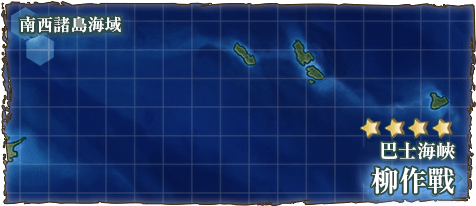
<style>
.page{position:relative;width:476px;height:206px}
.page>*{position:absolute;margin:0}
.t1{font:17px "RyuminPr6N-ExBold";color:#ffffff}
.t2{font:19px "RyuminPro-ExBold";color:#ffffff}
.t3{font:28px "RyuminPro-ExBold";color:#ffffff}
</style>
<div class="page">
<p class="t1" style="left:19px;top:16px;width:102px;height:17px">南西諸島海域</p>
<p class="t2" style="left:381px;top:142px;width:74px;height:18px">巴士海峽</p>
<p class="t3" style="left:371px;top:167px;width:84px;height:27px">柳作戰</p>
</div>
